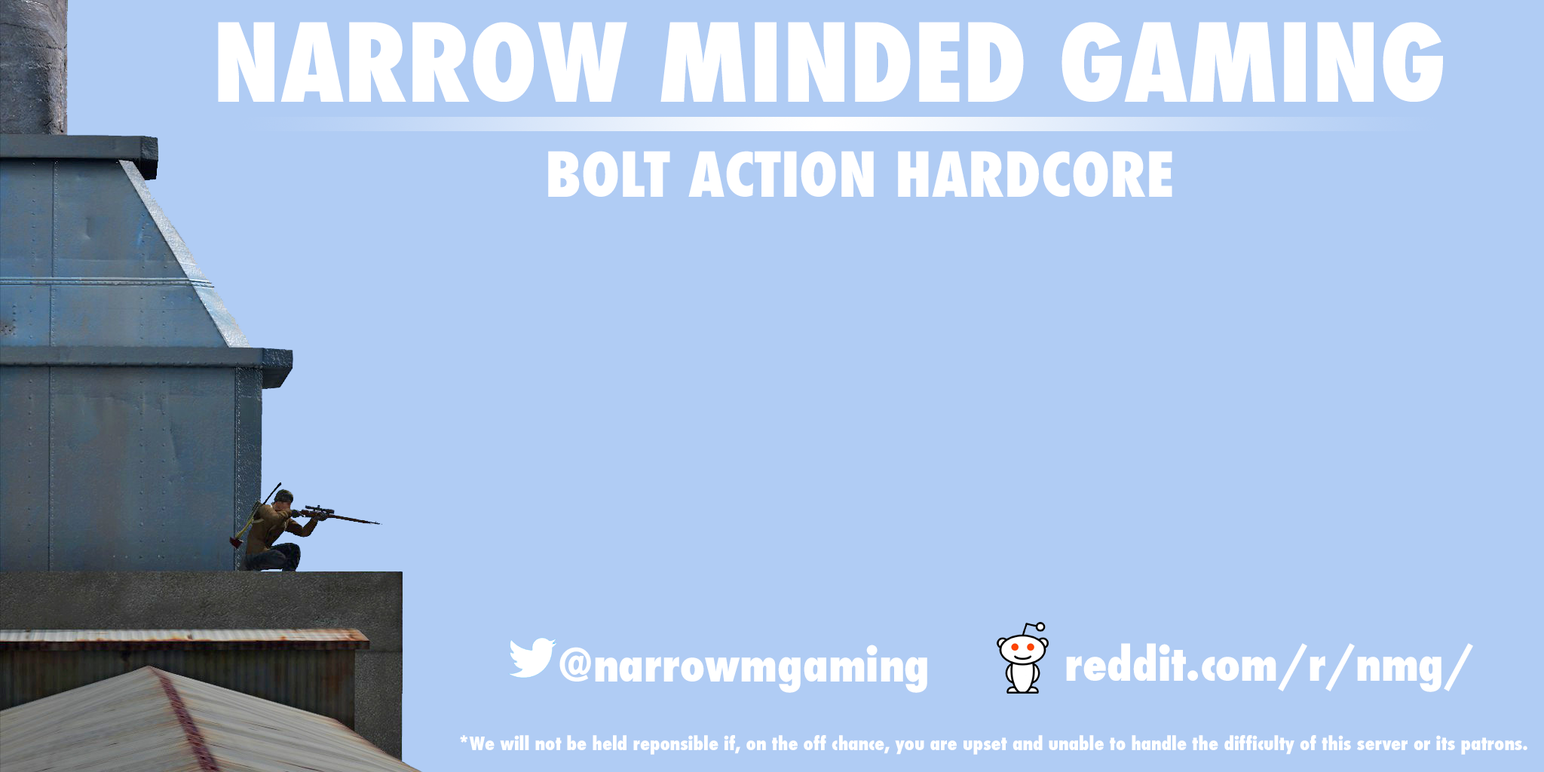
<style>
.page{position:relative;width:1544px;height:772px;background:#b0ccf4}
.page>*{position:absolute;margin:0}
.t1{font:105.6px "Futura-CondensedExtraBold";color:#ffffff}
.t2{font:60.3px "Futura-CondensedExtraBold";color:#ffffff}
.t3{font:45.2px "Futura-CondensedExtraBold";color:#ffffff}
.t4{font:18.1px "Futura-CondensedExtraBold";color:#ffffff}
</style>
<div class="page">
<p class="t1" style="left:218px;top:22px;width:1225px;height:80px">NARROW MINDED GAMING</p>
<p class="t2" style="left:548px;top:151px;width:625px;height:46px">BOLT ACTION HARDCORE</p>
<p class="t3" style="left:560px;top:645px;width:367px;height:48px">@narrowmgaming</p>
<p class="t3" style="left:1066px;top:643px;width:407px;height:49px">reddit.com/r/nmg/</p>
<p class="t4" style="left:460px;top:735px;width:1068px;height:20px">*We will not be held reponsible if, on the off chance, you are upset and unable to handle the difficulty of this server or its patrons.</p>
</div>
